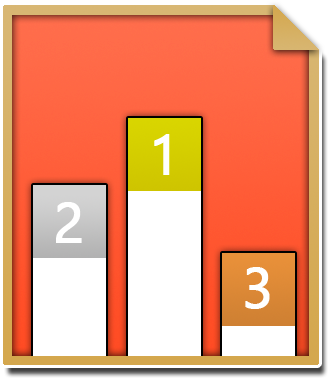
<style>
.page{position:relative;width:328px;height:378px;background:#ffffff}
.page>*{position:absolute;margin:0}
.t1{font:56.2px "NirmalaUI";color:#ffffff;font-weight:bold}
</style>
<div class="page">
<p class="t1" style="left:154px;top:134px;width:16px;height:41px">1</p>
<p class="t1" style="left:56px;top:202px;width:26px;height:41px">2</p>
<p class="t1" style="left:245px;top:267px;width:25px;height:42px">3</p>
</div>
